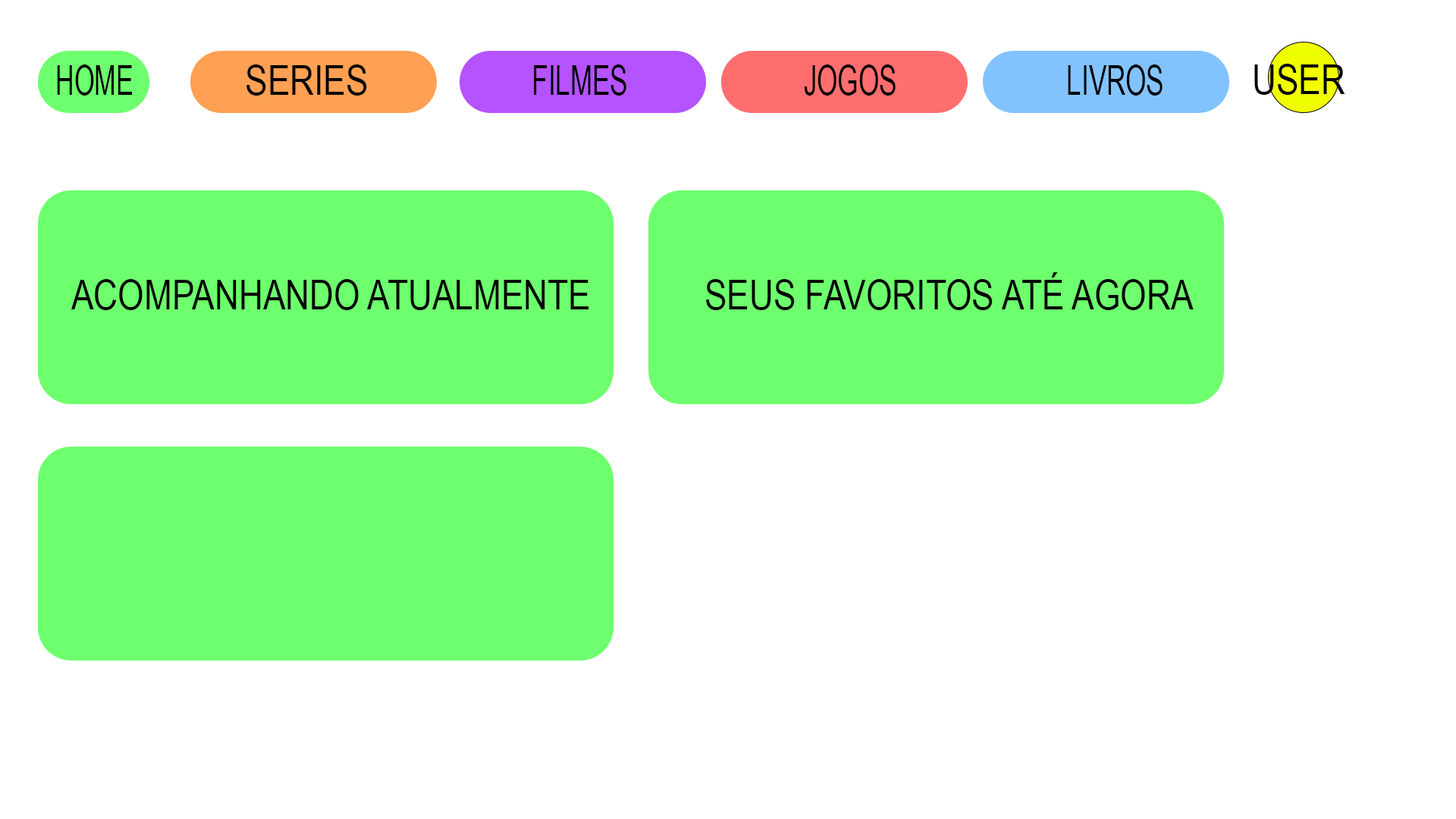
<style>
.page{position:relative;width:1456px;height:819px;background:#ffffff}
.page>*{position:absolute;margin:0}
.t1{font:40.9px "ArialNarrow";color:#000000;text-transform:uppercase;scale:0.77 1}
.t2{font:40.9px "ArialNarrow";color:#000000;text-transform:uppercase}
.t3{font:40.9px "ArialNarrow";color:#000000;text-transform:uppercase;scale:0.79 1}
</style>
<div class="page">
<p class="t1" style="left:57px;top:64px;width:75px;height:32px">homere</p>
<p class="t2" style="left:246px;top:64px;width:121px;height:32px">series</p>
<p class="t3" style="left:534px;top:64px;width:92px;height:32px">filmes</p>
<p class="t3" style="left:804px;top:64px;width:92px;height:32px">jogos</p>
<p class="t3" style="left:1068px;top:64px;width:95px;height:32px">livros</p>
<p class="t2" style="left:1254px;top:64px;width:91px;height:31px">user</p>
<p class="t2" style="left:71px;top:279px;width:518px;height:31px">Acompanhando atualmente</p>
<p class="t2" style="left:706px;top:272px;width:488px;height:38px">seus favoritos até agora</p>
</div>
